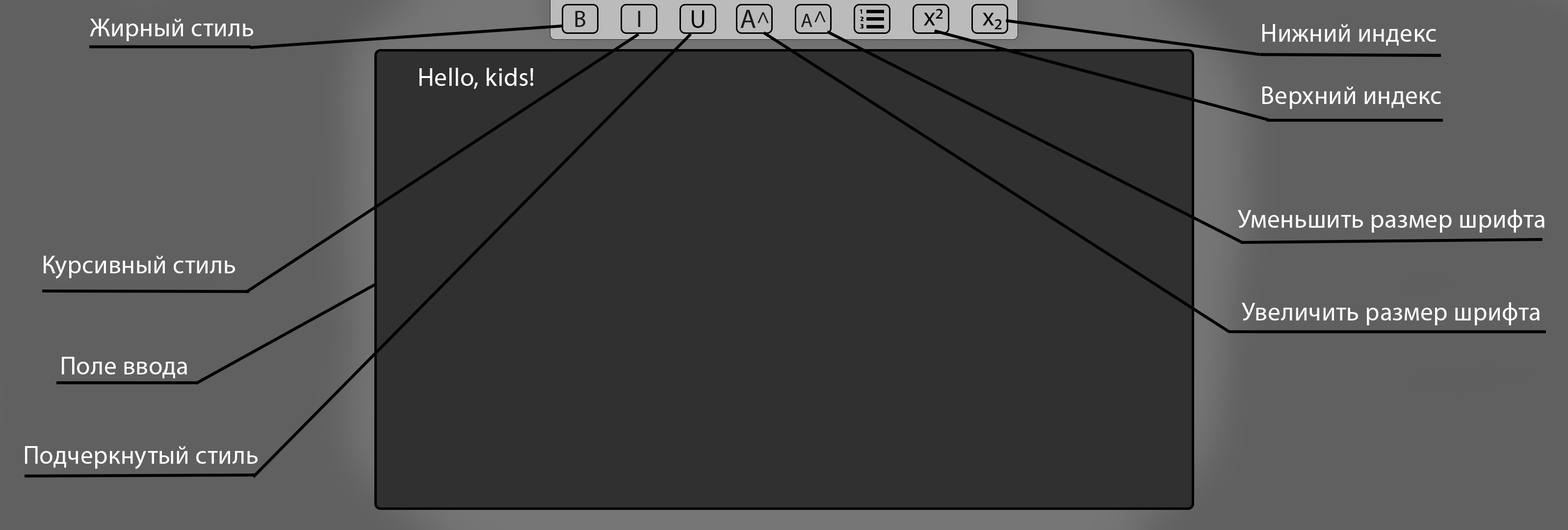
<style>
.page{position:relative;width:1568px;height:530px;background:#303030}
.page>*{position:absolute;margin:0}
.t1{font:25.5px "MyriadPro-Regular";letter-spacing:0.01em;color:#000000}
.t2{font:25.5px "MyriadPro-Regular";letter-spacing:0.01em;color:#ffffff}
</style>
<div class="page">
<p class="t1" style="left:692px;top:10px;width:13px;height:18px">U</p>
<p class="t1" style="left:924px;top:9px;width:19px;height:17px">x2</p>
<p class="t1" style="left:983px;top:13px;width:19px;height:16px">x2</p>
<p class="t2" style="left:90px;top:19px;width:163px;height:22px">Жирный стиль</p>
<p class="t2" style="left:1262px;top:24px;width:174px;height:22px">Нижний индекс</p>
<p class="t2" style="left:419px;top:68px;width:114px;height:21px">Hello, kids!</p>
<p class="t2" style="left:1262px;top:86px;width:179px;height:23px">Верхний индекс</p>
<p class="t2" style="left:1238px;top:209px;width:306px;height:24px">Уменьшить размер шрифта</p>
<p class="t2" style="left:44px;top:256px;width:191px;height:23px">Курсивный стиль</p>
<p class="t2" style="left:1242px;top:302px;width:298px;height:23px">Увеличить размер шрифта</p>
<p class="t2" style="left:62px;top:357px;width:125px;height:21px">Поле ввода</p>
<p class="t2" style="left:25px;top:446px;width:233px;height:23px">Подчеркнутый стиль</p>
</div>
